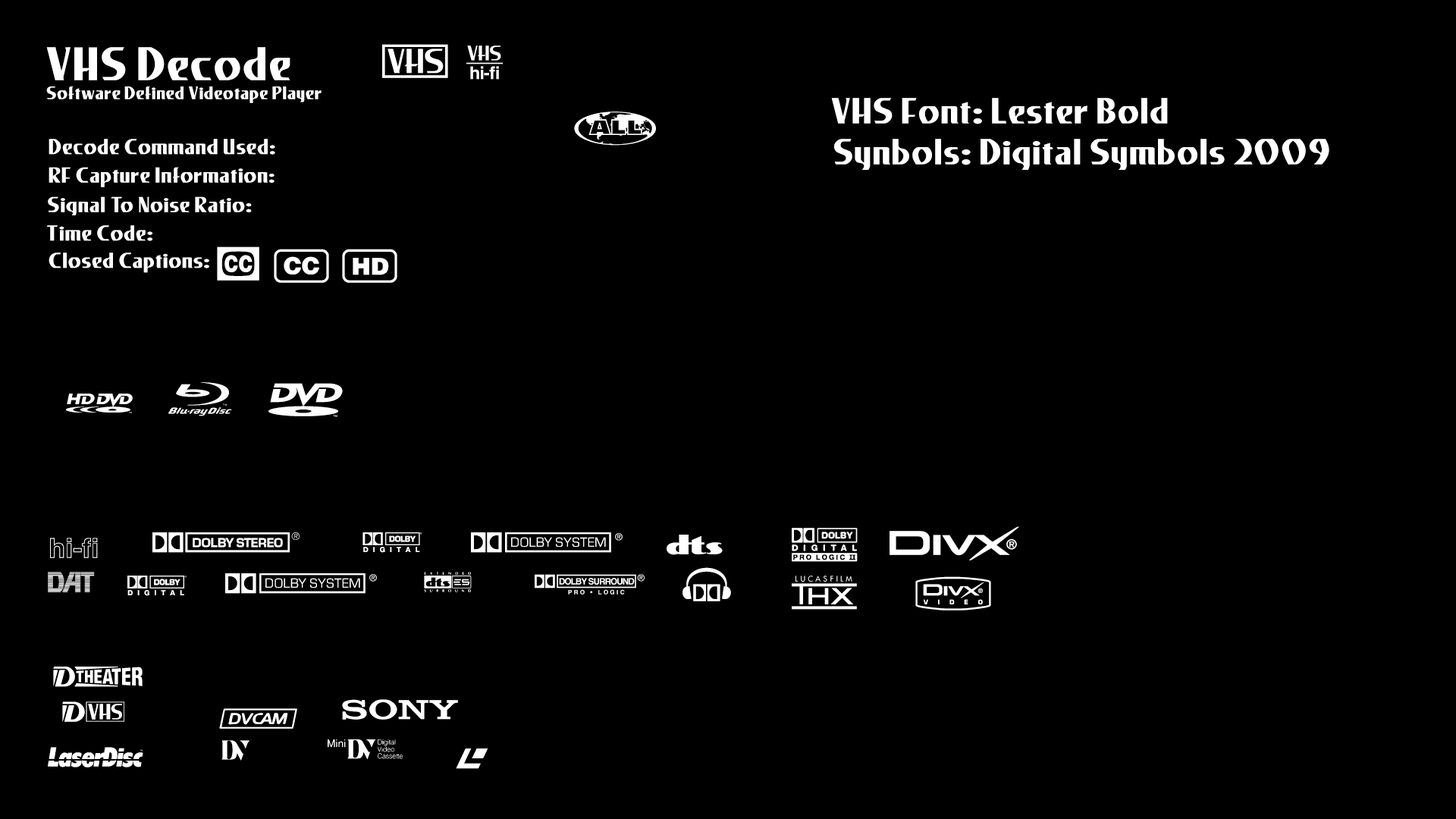
<style>
.page{position:relative;width:1456px;height:819px;background:#000000}
.page>*{position:absolute;margin:0}
.t1{font:19px/19px "LesterBold";color:#ffffff}
.t2{font:49.3px/13.6px "LesterBold";color:#ffffff}
.t3{font:37.9px "DigitalSymbols";color:#ffffff}
.t4{font:37.9px "LesterBold";color:#ffffff}
.t5{font:22.7px "LesterBold";color:#ffffff}
.t6{font:22.7px "DigitalSymbols";color:#ffffff}
</style>
<div class="page">
<p class="t1" style="left:46px;top:47px;width:276px;height:56px"><span class="t2">VHS Decode<br></span>Software Defined Videotape Player</p>
<p class="t3" style="left:382px;top:44px;width:66px;height:34px">|</p>
<p class="t3" style="left:466px;top:45px;width:37px;height:35px">ñ</p>
<p class="t4" style="left:831px;top:98px;width:337px;height:26px">VHS Font: Lester Bold</p>
<p class="t3" style="left:574px;top:111px;width:82px;height:35px">)</p>
<p class="t5" style="left:49px;top:139px;width:226px;height:16px">Decode Command Used:</p>
<p class="t4" style="left:834px;top:139px;width:495px;height:31px">Synbols: Digital Symbols 2009</p>
<p class="t5" style="left:49px;top:167px;width:226px;height:20px">RF Capture Information:</p>
<p class="t5" style="left:48px;top:196px;width:204px;height:19px">Signal To Noise Ratio:</p>
<p class="t5" style="left:46px;top:225px;width:106px;height:16px">Time Code:</p>
<p class="t5" style="left:49px;top:253px;width:160px;height:20px">Closed Captions:</p>
<p class="t3" style="left:217px;top:246px;width:42px;height:35px">?</p>
<p class="t3" style="left:274px;top:249px;width:55px;height:34px">Ņ</p>
<p class="t3" style="left:342px;top:249px;width:55px;height:34px">Ń</p>
<p class="t3" style="left:168px;top:382px;width:64px;height:34px">I</p>
<p class="t3" style="left:268px;top:383px;width:75px;height:34px">z</p>
<p class="t6" style="left:66px;top:394px;width:67px;height:19px">á</p>
<p class="t6" style="left:152px;top:532px;width:148px;height:21px">–</p>
<p class="t6" style="left:362px;top:532px;width:60px;height:21px">—</p>
<p class="t6" style="left:471px;top:532px;width:152px;height:21px">À</p>
<p class="t3" style="left:792px;top:528px;width:66px;height:34px">÷</p>
<p class="t3" style="left:890px;top:526px;width:129px;height:34px">o</p>
<p class="t6" style="left:50px;top:538px;width:48px;height:20px">∆</p>
<p class="t6" style="left:667px;top:535px;width:56px;height:20px">~</p>
<p class="t3" style="left:682px;top:567px;width:49px;height:34px">[</p>
<p class="t6" style="left:48px;top:572px;width:47px;height:20px">õ</p>
<p class="t6" style="left:127px;top:576px;width:60px;height:20px">—</p>
<p class="t6" style="left:225px;top:573px;width:152px;height:21px">À</p>
<p class="t6" style="left:424px;top:572px;width:48px;height:20px">«</p>
<p class="t6" style="left:535px;top:574px;width:110px;height:21px">Ã</p>
<p class="t3" style="left:792px;top:576px;width:65px;height:34px">ù</p>
<p class="t3" style="left:915px;top:576px;width:76px;height:34px">p</p>
<p class="t6" style="left:53px;top:667px;width:90px;height:20px">‘</p>
<p class="t6" style="left:62px;top:701px;width:62px;height:21px">”</p>
<p class="t6" style="left:342px;top:699px;width:116px;height:21px">€</p>
<p class="t6" style="left:219px;top:708px;width:78px;height:21px">⁄</p>
<p class="t6" style="left:48px;top:747px;width:95px;height:20px">û</p>
<p class="t6" style="left:221px;top:740px;width:29px;height:21px">ƒ</p>
<p class="t6" style="left:328px;top:739px;width:75px;height:21px">≈</p>
<p class="t6" style="left:456px;top:748px;width:32px;height:21px">Ÿ</p>
</div>
